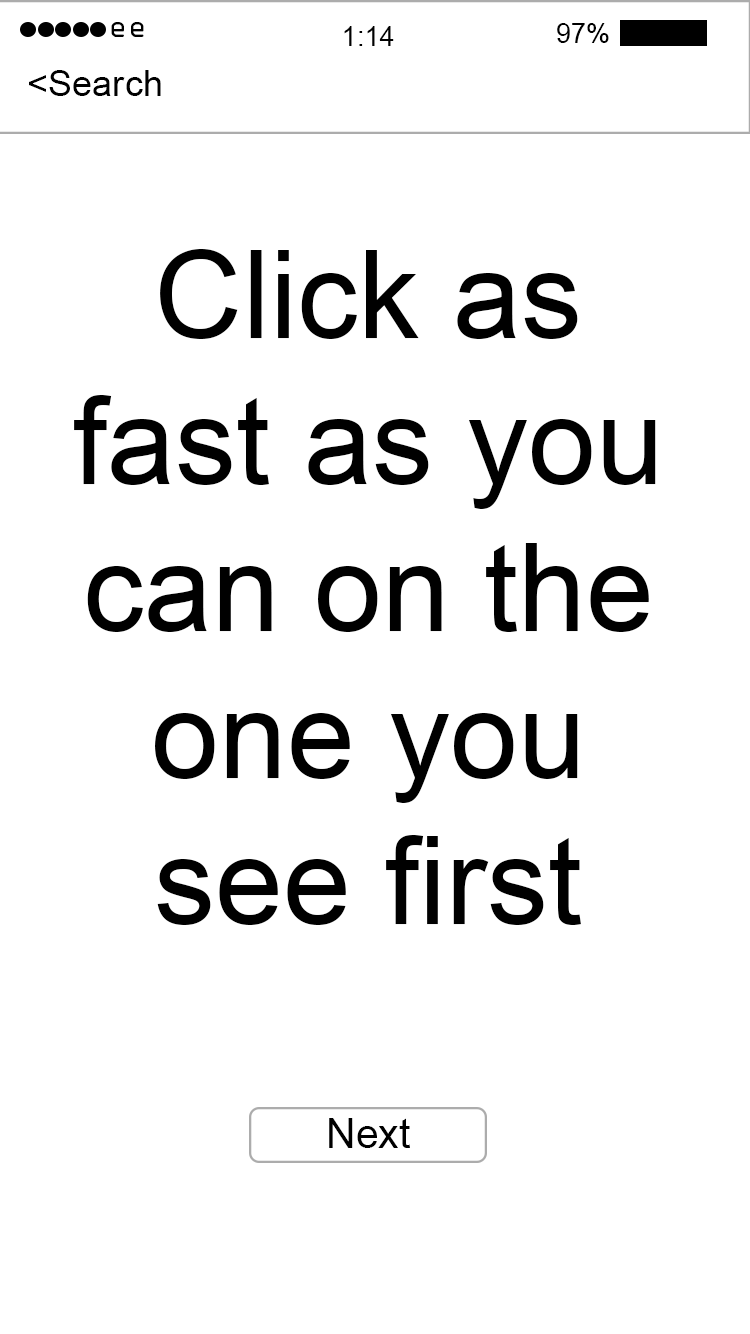
<style>
.page{position:relative;width:750px;height:1334px;background:#ffffff}
.page>*{position:absolute;margin:0}
.t1{font:27.2px "OCRAStd";color:#000000}
.t2{font:27.2px "ArialMT";color:#000000}
.t3{font:36.2px "ArialMT";color:#000000}
.t4{font:122.2px "ArialMT";color:#000000}
.t5{font:40.8px "ArialMT";color:#000000}
</style>
<div class="page">
<p class="t1" style="left:111px;top:22px;width:33px;height:15px">ee</p>
<p class="t2" style="left:344px;top:26px;width:50px;height:20px">1:14</p>
<p class="t2" style="left:557px;top:23px;width:52px;height:20px">97%</p>
<p class="t3" style="left:29px;top:70px;width:132px;height:26px">&lt;Search</p>
<p class="t4" style="left:74px;top:249px;width:582px;height:676px;text-align:center">Click as fast as you can on the one you see first</p>
<p class="t5" style="left:329px;top:1118px;width:81px;height:30px">Next</p>
</div>
